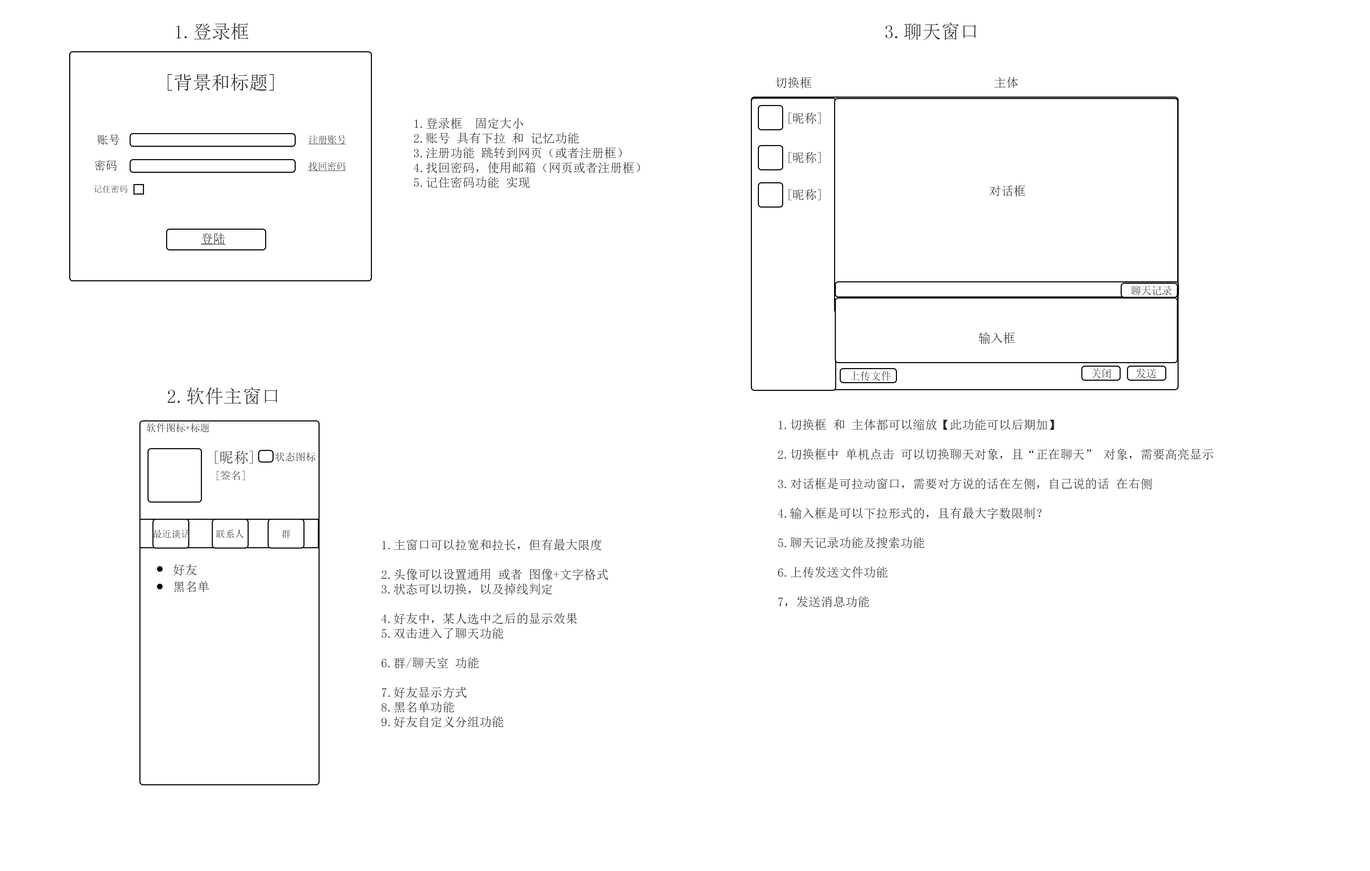
<style>
.page{position:relative;width:1370px;height:871px;background:#ffffff}
.page>*{position:absolute;margin:0}
.t1{font:18.9px "SimSun";color:#2e2e2e}
.t2{font:12.3px "SimSun";color:#2e2e2e}
.t3{font:11.7px "SimSun";color:#2e2e2e}
.t4{font:9.5px "SimSun";color:#2e2e2e;text-decoration:underline}
.t5{font:8.6px "SimSun";color:#2e2e2e}
.t6{font:12.3px "SimSun";color:#2e2e2e;text-decoration:underline}
.t7{font:10.4px "SimSun";color:#2e2e2e}
.t8{font:9.7px "SimSun";color:#2e2e2e}
.t9{font:14.6px "SimSun";color:#2e2e2e}
.t10{font:10.3px "SimSun";color:#2e2e2e}
.t11{font:10.7px "SimSun";color:#2e2e2e}
.t12{font:9.5px "SimSun";color:#2e2e2e}
</style>
<div class="page">
<p class="t1" style="left:176px;top:23px;width:73px;height:17px">1.登录框</p>
<p class="t1" style="left:885px;top:22px;width:91px;height:18px">3.聊天窗口</p>
<p class="t1" style="left:167px;top:73px;width:107px;height:18px">[背景和标题]</p>
<p class="t2" style="left:775px;top:77px;width:36px;height:11px">切换框</p>
<p class="t2" style="left:994px;top:77px;width:24px;height:11px">主体</p>
<p class="t2" style="left:788px;top:112px;width:32px;height:12px">[昵称]</p>
<p class="t2" style="left:414px;top:118px;width:226px;height:70px">1.登录框  固定大小<br>2.账号 具有下拉 和 记忆功能<br>3.注册功能 跳转到网页（或者注册框）<br>4.找回密码，使用邮箱（网页或者注册框）<br>5.记住密码功能 实现</p>
<p class="t3" style="left:97px;top:134px;width:22px;height:11px">账号</p>
<p class="t4" style="left:308px;top:135px;width:39px;height:9px">注册账号</p>
<p class="t3" style="left:94px;top:160px;width:23px;height:11px">密码</p>
<p class="t4" style="left:308px;top:162px;width:38px;height:9px">找回密码</p>
<p class="t2" style="left:788px;top:152px;width:32px;height:11px">[昵称]</p>
<p class="t5" style="left:94px;top:185px;width:33px;height:8px">记住密码</p>
<p class="t2" style="left:989px;top:185px;width:36px;height:12px">对话框</p>
<p class="t2" style="left:788px;top:189px;width:32px;height:11px">[昵称]</p>
<p class="t6" style="left:201px;top:233px;width:25px;height:12px">登陆</p>
<p class="t7" style="left:1130px;top:286px;width:42px;height:9px">聊天记录</p>
<p class="t2" style="left:978px;top:332px;width:37px;height:12px">输入框</p>
<p class="t7" style="left:850px;top:371px;width:41px;height:10px">上传文件</p>
<p class="t7" style="left:1091px;top:368px;width:19px;height:10px">关闭</p>
<p class="t7" style="left:1136px;top:368px;width:20px;height:10px">发送</p>
<p class="t1" style="left:167px;top:387px;width:110px;height:17px">2.软件主窗口</p>
<p class="t8" style="left:147px;top:423px;width:62px;height:9px">软件图标+标题</p>
<p class="t2" style="left:778px;top:419px;width:435px;height:188px">1.切换框 和 主体都可以缩放【此功能可以后期加】<br><br>2.切换框中 单机点击 可以切换聊天对象，且“正在聊天” 对象，需要高亮显示<br><br>3.对话框是可拉动窗口，需要对方说的话在左侧，自己说的话 在右侧<br><br>4.输入框是可以下拉形式的，且有最大字数限制？<br><br>5.聊天记录功能及搜索功能<br><br>6.上传发送文件功能<br><br>7，发送消息功能</p>
<p class="t9" style="left:215px;top:450px;width:38px;height:14px">[昵称]</p>
<p class="t10" style="left:275px;top:452px;width:41px;height:9px">状态图标</p>
<p class="t11" style="left:217px;top:470px;width:28px;height:10px">[签名]</p>
<p class="t12" style="left:153px;top:529px;width:37px;height:9px">最近谈话</p>
<p class="t12" style="left:216px;top:529px;width:28px;height:9px">联系人</p>
<p class="t12" style="left:282px;top:529px;width:8px;height:9px">群</p>
<p class="t2" style="left:381px;top:539px;width:227px;height:188px">1.主窗口可以拉宽和拉长，但有最大限度<br><br>2.头像可以设置通用 或者 图像+文字格式<br>3.状态可以切换，以及掉线判定<br><br>4.好友中，某人选中之后的显示效果<br>5.双击进入了聊天功能<br><br>6.群/聊天室 功能<br><br>7.好友显示方式<br>8.黑名单功能<br>9.好友自定义分组功能</p>
<p class="t2" style="left:173px;top:564px;width:24px;height:11px">好友</p>
<p class="t2" style="left:173px;top:581px;width:36px;height:11px">黑名单</p>
</div>
